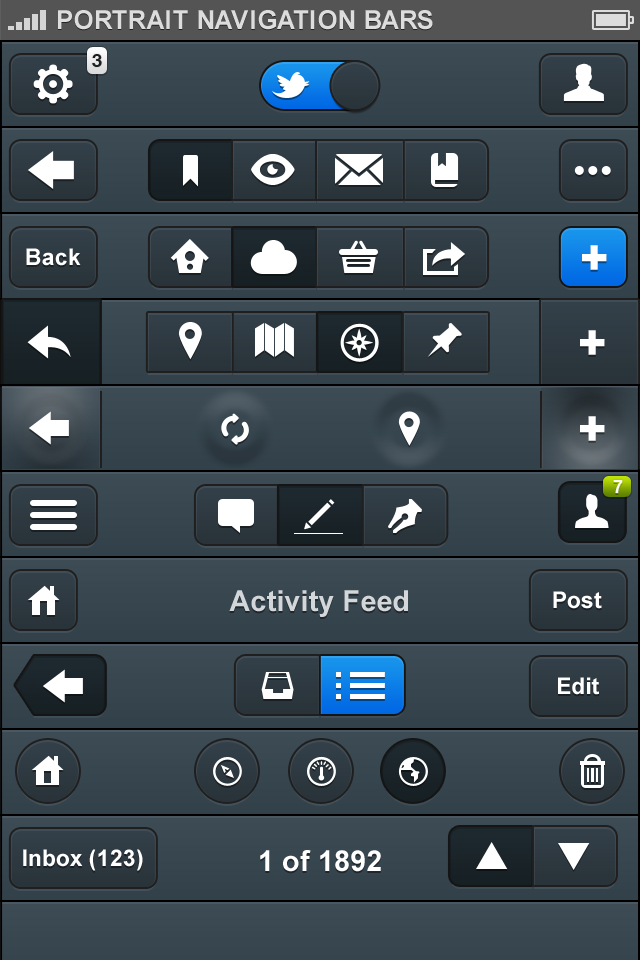
<style>
.page{position:relative;width:640px;height:960px}
.page>*{position:absolute;margin:0}
.t1{font:26px "Arial-BoldMT";color:#dddddd;text-transform:uppercase}
.t2{font:17.9px "HelveticaNeueLTCom-Bd";color:#1f1f1f}
.t3{font:46px "Arial-Black";color:#ffffff;text-transform:uppercase}
.t4{font:23px "Arial-BoldMT";color:#ffffff}
.t5{font:17.9px "HelveticaNeueLTCom-Bd";color:#fafafa}
.t6{font:28.8px "Arial-BoldMT";color:#d4d7d9}
.t7{font:28.8px "Arial-BoldMT";color:#ffffff}
</style>
<div class="page">
<p class="t1" style="left:58px;top:10px;width:375px;height:20px">Portrait Navigation Bars</p>
<p class="t2" style="left:92px;top:54px;width:10px;height:13px">3</p>
<p class="t3" style="left:582px;top:245px;width:25px;height:25px">+</p>
<p class="t4" style="left:26px;top:248px;width:55px;height:18px">Back</p>
<p class="t3" style="left:580px;top:330px;width:25px;height:25px">+</p>
<p class="t3" style="left:580px;top:416px;width:25px;height:25px">+</p>
<p class="t5" style="left:613px;top:480px;width:10px;height:13px">7</p>
<p class="t6" style="left:229px;top:590px;width:179px;height:27px">Activity Feed</p>
<p class="t4" style="left:553px;top:591px;width:49px;height:18px">Post</p>
<p class="t4" style="left:558px;top:677px;width:41px;height:18px">Edit</p>
<p class="t4" style="left:23px;top:849px;width:120px;height:22px">Inbox (123)</p>
<p class="t7" style="left:260px;top:850px;width:121px;height:22px">1 of 1892</p>
</div>
